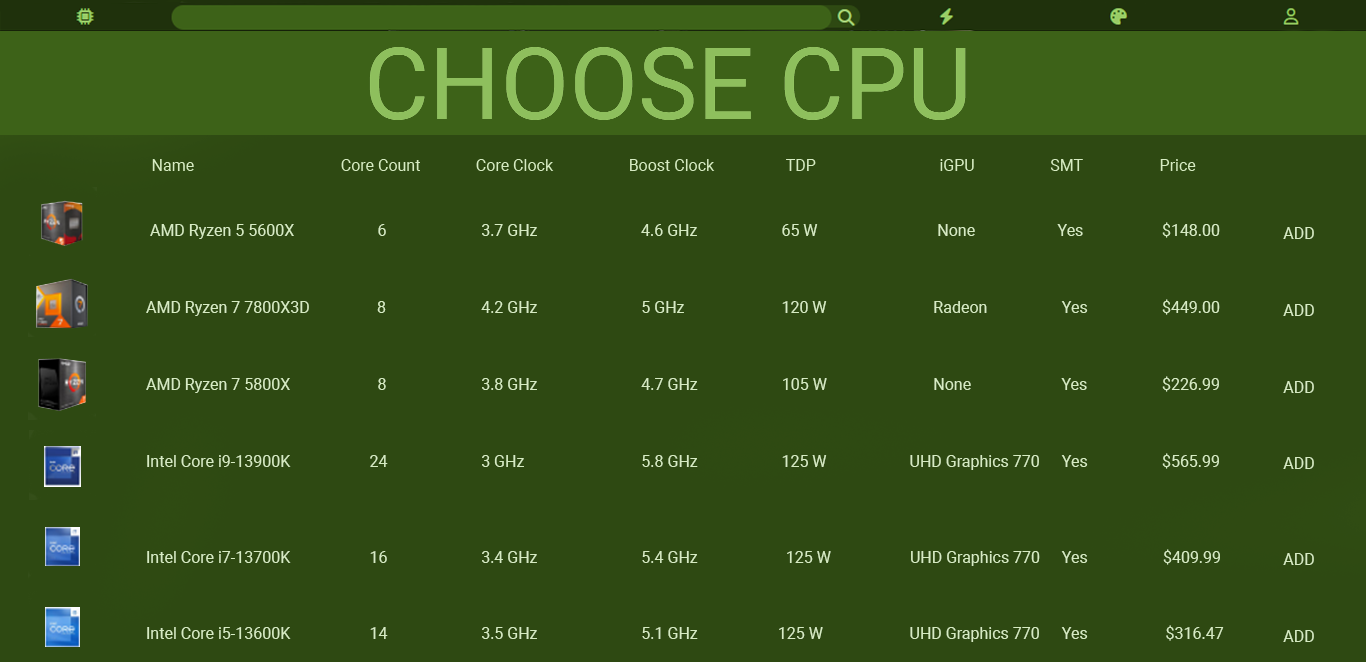
<style>
.page{position:relative;width:1366px;height:662px;background:#2e4912}
.page>*{position:absolute;margin:0}
.t1{font:16px "Roboto-Regular";color:#d6ebc2}
</style>
<div class="page">
<p class="t1" style="left:146px;top:222px;width:1078px;height:420px">AMD Ryzen 5 5600X                     6                      3.7 GHz                          4.6 GHz                65 W                    None             Yes     $148.00<br><br><br><br>AMD Ryzen 7 7800X3D                 8                      4.2 GHz                  5 GHz                 120 W                   Radeon      Yes     $449.00<br><br><br><br>AMD Ryzen 7 5800X                      8                      3.8 GHz                  4.7 GHz        105 W                   None               Yes    $226.99<br> <br> <br><br>Intel Core i9-13900K                    24                      3 GHz                  5.8 GHz                125 W             UHD Graphics 770     Yes    $565.99<br>  <br><br><br><br>Intel Core i7-13700K                    16                      3.4 GHz                  5.4 GHz         125 W    UHD Graphics 770     Yes                   $409.99<br>  <br><br><br>Intel Core i5-13600K                    14                      3.5 GHz                  5.1 GHz       125 W             UHD Graphics 770     Yes             $316.47</p>
<p class="t1" style="left:1283px;top:227px;width:31px;height:415px">ADD<br><br><br><br>ADD<br><br><br><br>ADD<br><br><br><br>ADD<br><br><br><br><br>ADD<br><br><br><br>ADD</p>
</div>
